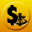
<style>
.page{position:relative;width:32px;height:32px}
.page>*{position:absolute;margin:0}
.t1{font:24px "AbadiMT-CondensedExtraBold";color:#000000;font-weight:bold}
</style>
<div class="page">
<p class="t1" style="left:7px;top:5px;width:11px;height:21px">$</p>
</div>
